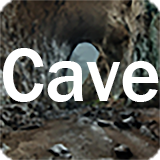
<style>
.page{position:relative;width:160px;height:160px}
.page>*{position:absolute;margin:0}
.t1{font:78.1px "FranklinGothic-Medium";color:#ffffff}
</style>
<div class="page">
<p class="t1" style="left:3px;top:48px;width:156px;height:54px">Cave</p>
</div>
